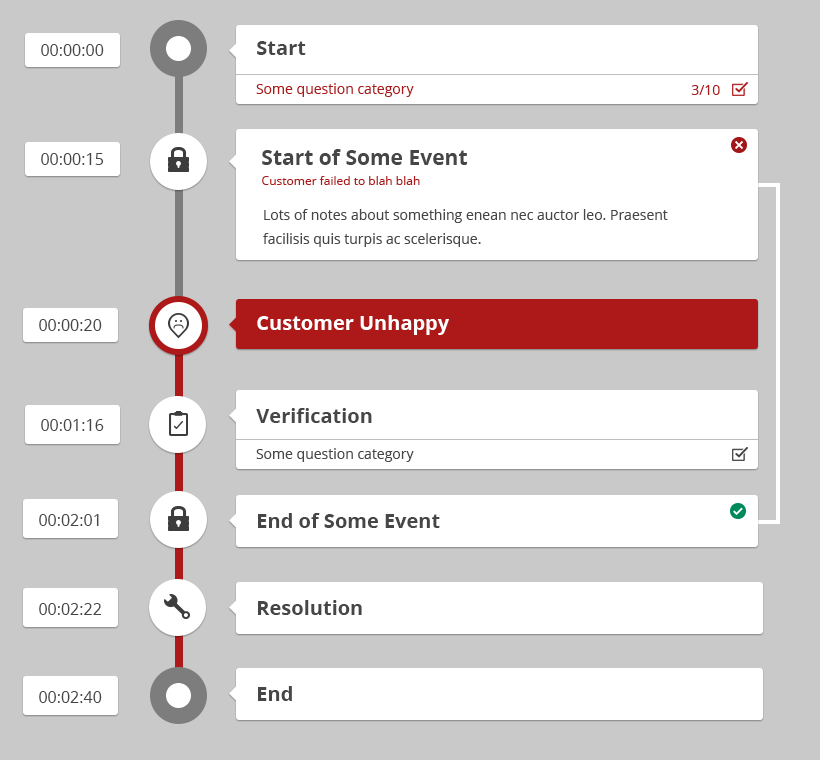
<style>
.page{position:relative;width:820px;height:760px;background:#c9c9c9}
.page>*{position:absolute;margin:0}
.t1{font:20px "OpenSans-Bold";color:#464646}
.t2{font:16px "OpenSans";color:#464646}
.t3{font:14px "OpenSans";color:#ad1919}
.t4{font:21px "OpenSans-Bold";color:#464646}
.t5{font:12px "OpenSans";color:#ad1919}
.t6{font:14px/24px "OpenSans";color:#464646}
.t7{font:20px "OpenSans-Bold";color:#ffffff}
.t8{font:14px "OpenSans";color:#464646}
</style>
<div class="page">
<p class="t1" style="left:257px;top:41px;width:49px;height:14px">Start</p>
<p class="t2" style="left:41px;top:44px;width:63px;height:12px">00:00:00</p>
<p class="t3" style="left:256px;top:83px;width:158px;height:14px">Some question category</p>
<p class="t3" style="left:691px;top:85px;width:29px;height:10px">3/10</p>
<p class="t4" style="left:262px;top:149px;width:205px;height:16px">Start of Some Event</p>
<p class="t2" style="left:41px;top:153px;width:63px;height:12px">00:00:15</p>
<p class="t5" style="left:262px;top:176px;width:158px;height:9px">Customer failed to blah blah</p>
<p class="t6" style="left:263px;top:209px;width:405px;height:38px">Lots of notes about something enean nec auctor leo. Praesent<br>facilisis quis turpis ac scelerisque.</p>
<p class="t7" style="left:257px;top:315px;width:192px;height:20px">Customer Unhappy</p>
<p class="t2" style="left:39px;top:319px;width:63px;height:12px">00:00:20</p>
<p class="t1" style="left:256px;top:408px;width:116px;height:15px">Verification</p>
<p class="t2" style="left:41px;top:419px;width:63px;height:12px">00:01:16</p>
<p class="t8" style="left:256px;top:448px;width:158px;height:14px">Some question category</p>
<p class="t2" style="left:39px;top:514px;width:60px;height:12px">00:02:01</p>
<p class="t1" style="left:258px;top:513px;width:182px;height:15px">End of Some Event</p>
<p class="t2" style="left:39px;top:603px;width:63px;height:12px">00:02:22</p>
<p class="t1" style="left:258px;top:600px;width:104px;height:15px">Resolution</p>
<p class="t1" style="left:258px;top:686px;width:34px;height:15px">End</p>
<p class="t2" style="left:39px;top:691px;width:63px;height:12px">00:02:40</p>
</div>
